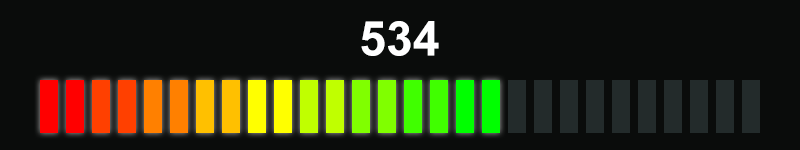
<style>
.page{position:relative;width:800px;height:150px;background:#0a0c0b}
.page>*{position:absolute;margin:0}
.t1{font:48px "Arial-BoldMT";color:#ffffff}
</style>
<div class="page">
<p class="t1" style="left:361px;top:21px;width:78px;height:35px">534</p>
</div>
